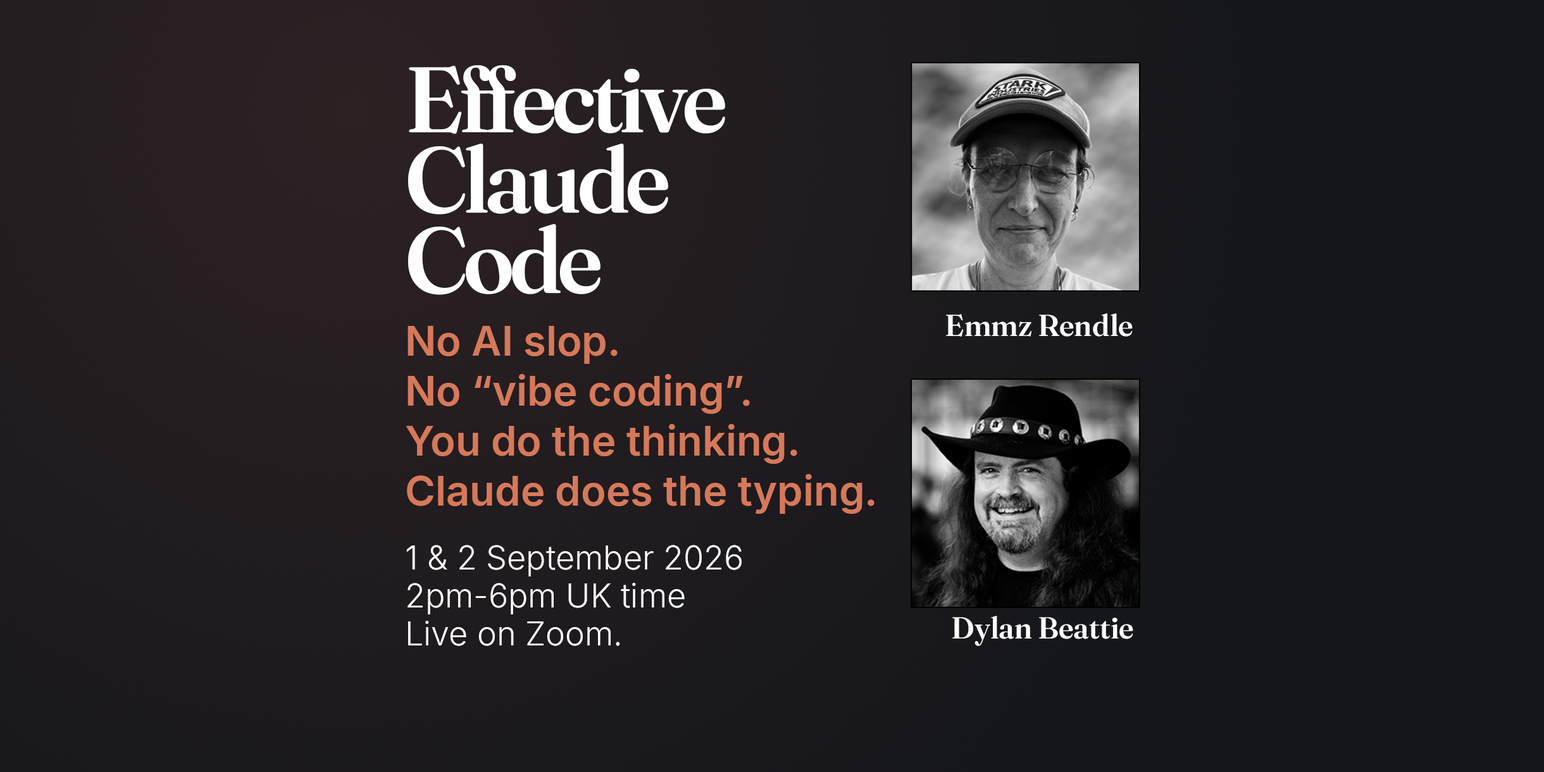
<style>
.page{position:relative;width:1544px;height:772px;background:#14161b}
.page>*{position:absolute;margin:0}
.t1{font:92.7px/80.2px "Fraunces72pt-SemiBold";letter-spacing:-0.05em;color:#ffffff}
.t2{font:92.7px/80.2px "Fraunces72pt-SemiBold";letter-spacing:-0.07em;color:#ffffff}
.t3{font:30.4px "Fraunces72pt-SemiBold";color:#ffffff}
.t4{font:41.1px/50px "Inter-SemiBold";color:#d6795a}
.t5{font:32.9px/38px "Inter-Light";color:#ffffff}
</style>
<div class="page">
<p class="t1" style="left:408px;top:65px;width:317px;height:230px">E<span class="t2">f</span>fective <br>Claude <br>Code</p>
<p class="t3" style="left:946px;top:313px;width:187px;height:24px">Emmz Rendle</p>
<p class="t4" style="left:406px;top:326px;width:469px;height:188px">No AI slop.<br>No “vibe coding”.<br>You do the thinking.<br>Claude does the typing.</p>
<p class="t5" style="left:406px;top:545px;width:336px;height:101px">1 &amp; 2 September 2026<br>2pm-6pm UK time<br>Live on Zoom.</p>
<p class="t3" style="left:953px;top:616px;width:181px;height:30px">Dylan Beattie</p>
</div>
